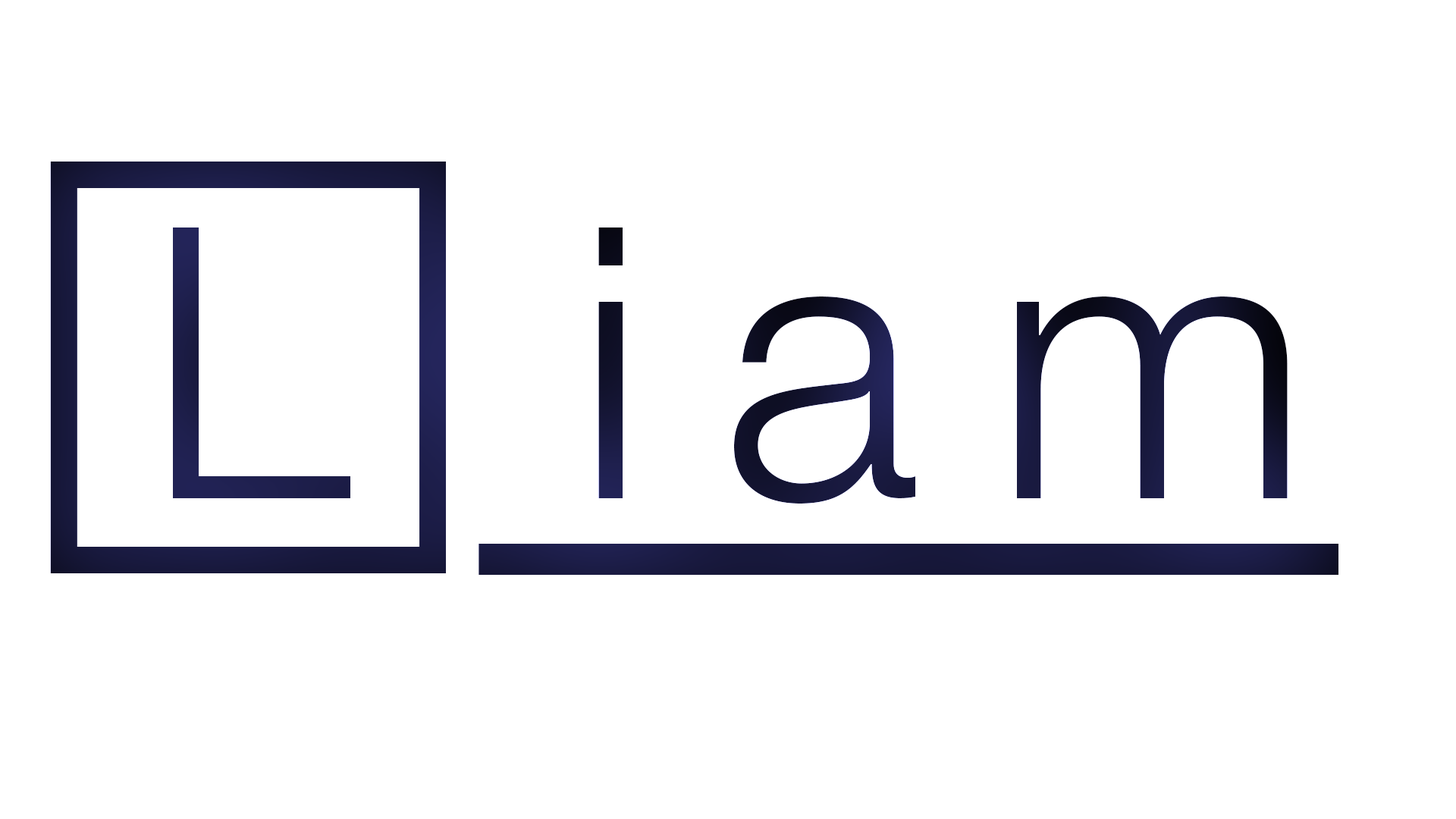
<style>
.page{position:relative;width:1456px;height:819px;background:#ffffff}
.page>*{position:absolute;margin:0}
.t1{font:379.2px "HelveticaNeueLTPro-Lt";letter-spacing:0.2em}
</style>
<div class="page">
<p class="t1" style="left:173px;top:227px;width:1115px;height:277px">L iam</p>
</div>
